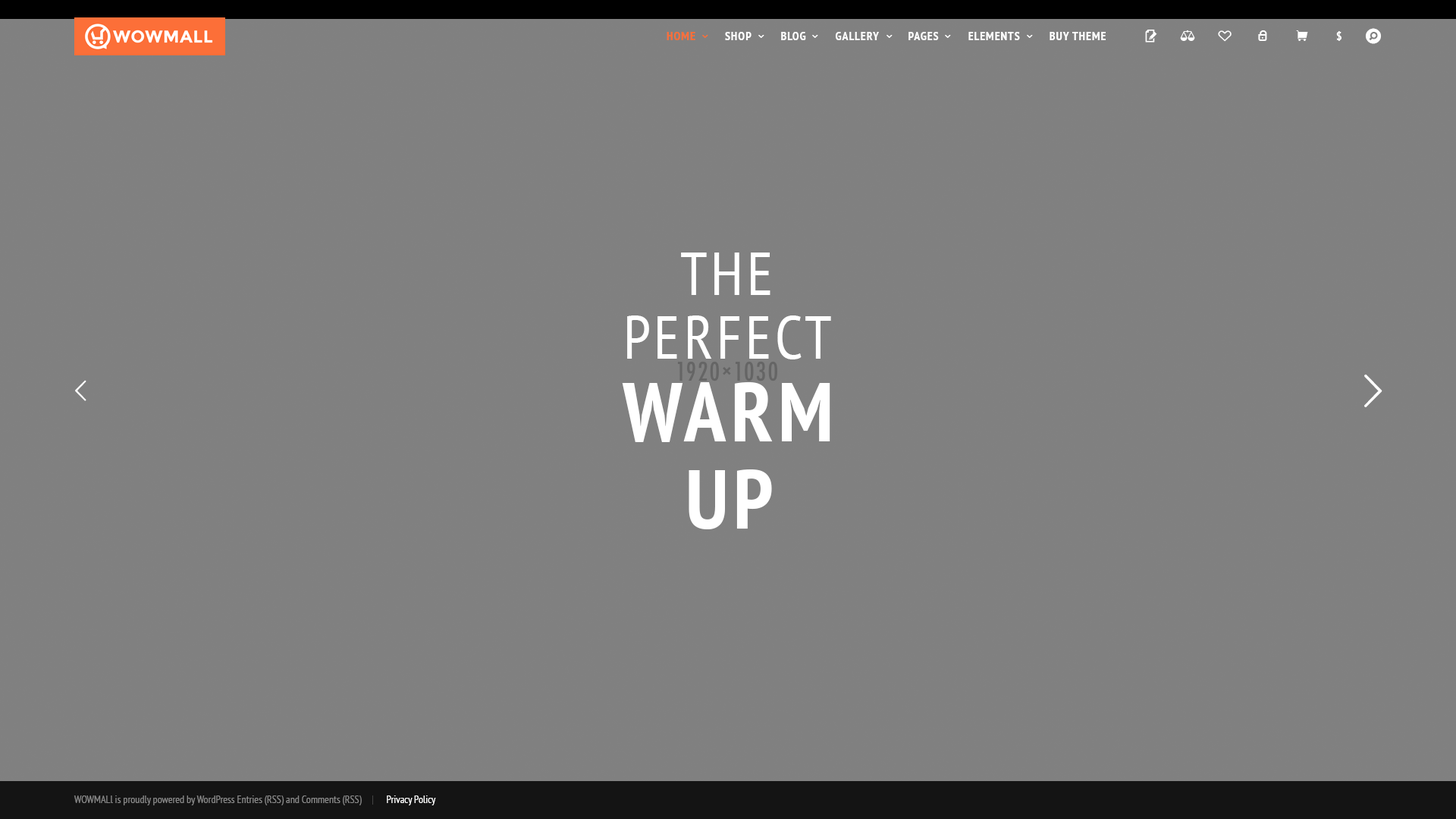
<style>
.page{position:relative;width:1456px;height:819px;background:#808080}
.page>*{position:absolute;margin:0}
.t1{font:12.1px "PTSans-NarrowBold";letter-spacing:0.06em;color:#ffffff;text-transform:uppercase}
.t2{font:12.1px "PTSans-NarrowBold";letter-spacing:0.06em;color:#fc6f38;text-transform:uppercase}
.t3{font:60.7px/63.7px "PTSans-Narrow";letter-spacing:0.06em;color:#ffffff;text-transform:uppercase}
.t4{font:83.4px/87.2px "PTSans-NarrowBold";letter-spacing:0.06em;color:#ffffff;text-transform:uppercase}
.t5{font:10.6px "PTSans-Narrow";color:#888888}
.t6{font:10.6px "PTSans-Narrow";color:#ffffff}
</style>
<div class="page">
<p class="t1" style="left:667px;top:32px;width:439px;height:8px"><span class="t2">Home        </span> Shop         Blog         Gallery         Pages         elements         Buy Theme</p>
<p class="t1" style="left:1336px;top:31px;width:5px;height:10px">$</p>
<p class="t3" style="left:627px;top:253px;width:204px;height:106px;text-align:center">the<br>perfect</p>
<p class="t4" style="left:622px;top:382px;width:208px;height:147px;text-align:center">Warm<br>Up</p>
<p class="t5" style="left:74px;top:795px;width:362px;height:10px">WOWMALl is proudly powered by WordPress Entries (RSS) and Comments (RSS)           <span class="t6">Privacy Policy</span></p>
</div>
